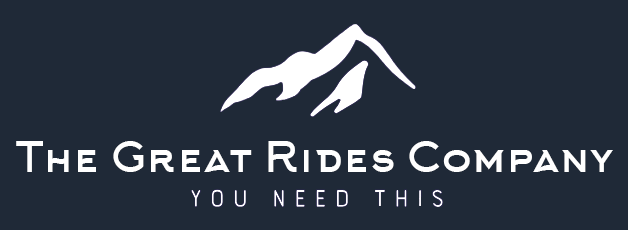
<style>
.page{position:relative;width:628px;height:230px;background:#1f2937}
.page>*{position:absolute;margin:0}
.t1{font:42px "Arkhip";color:#ffffff}
</style>
<div class="page">
<p class="t1" style="left:16px;top:141px;width:597px;height:31px">The Great Rides Company</p>
</div>
